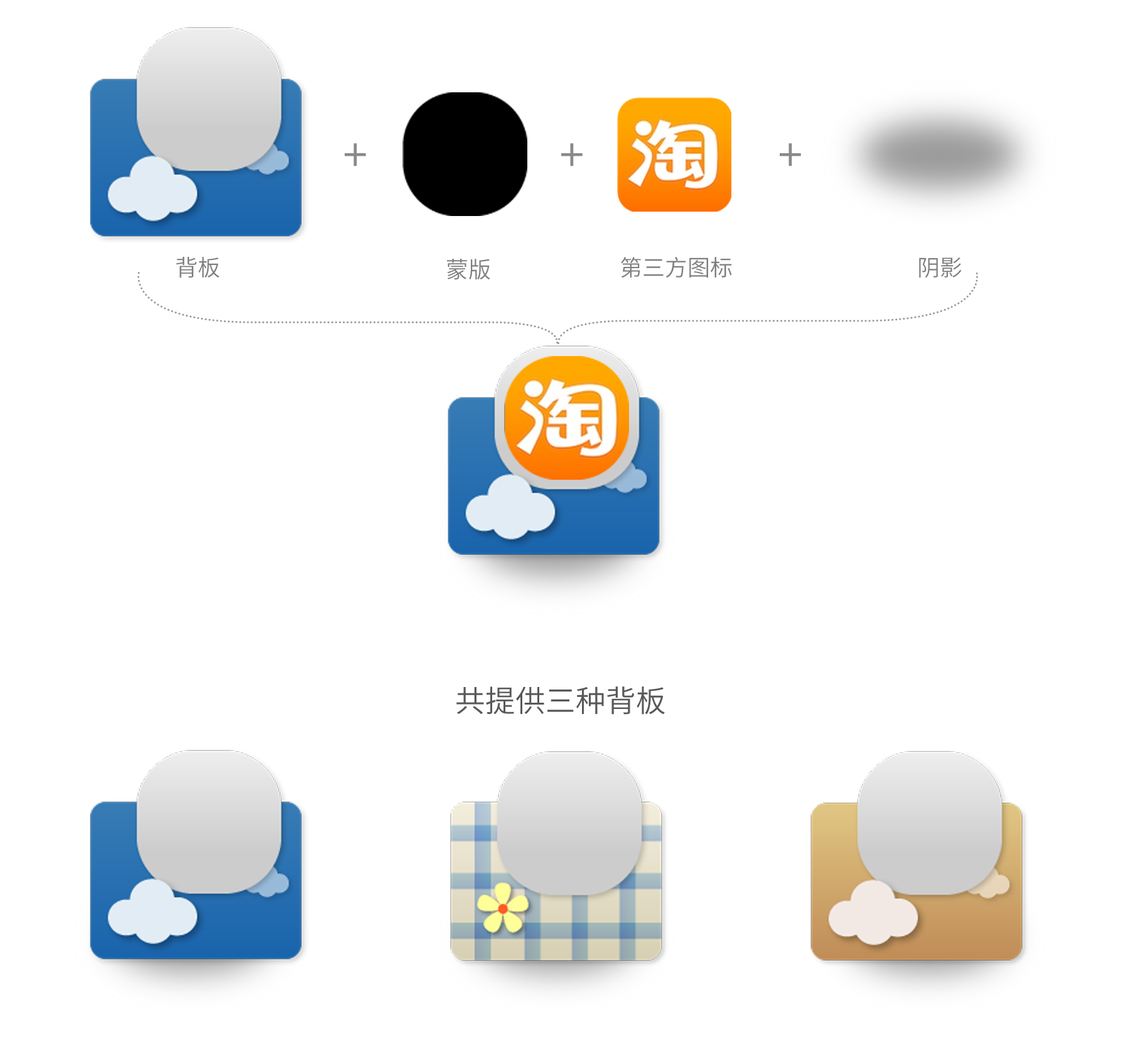
<style>
.page{position:relative;width:1130px;height:1055px;background:#ffffff}
.page>*{position:absolute;margin:0}
.t1{font:45.2px "SourceHanSansCN-Normal";color:#898989}
.t2{font:22.6px "SourceHanSansCN-Normal";color:#7f7f7f}
.t3{font:30.1px "SourceHanSansCN-Normal";color:#585858}
</style>
<div class="page">
<p class="t1" style="left:345px;top:143px;width:21px;height:23px">+</p>
<p class="t1" style="left:561px;top:143px;width:22px;height:23px">+</p>
<p class="t1" style="left:780px;top:143px;width:21px;height:23px">+</p>
<p class="t2" style="left:176px;top:257px;width:44px;height:21px">背板</p>
<p class="t2" style="left:621px;top:257px;width:111px;height:21px">第三方图标</p>
<p class="t2" style="left:919px;top:257px;width:43px;height:21px">阴影</p>
<p class="t2" style="left:447px;top:259px;width:43px;height:21px">蒙版</p>
<p class="t3" style="left:457px;top:686px;width:208px;height:29px">共提供三种背板</p>
</div>
